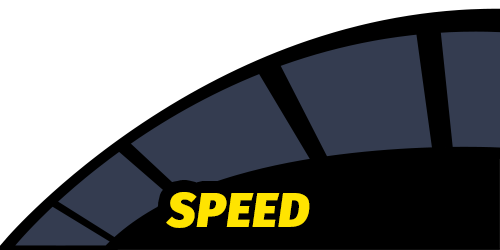
<style>
.page{position:relative;width:500px;height:250px;background:#ffffff}
.page>*{position:absolute;margin:0}
.t1{font:48px "FiraSans-BlackItalic";color:#ffe400;font-weight:bold}
</style>
<div class="page">
<p class="t1" style="left:166px;top:192px;width:144px;height:36px">SPEED</p>
</div>
